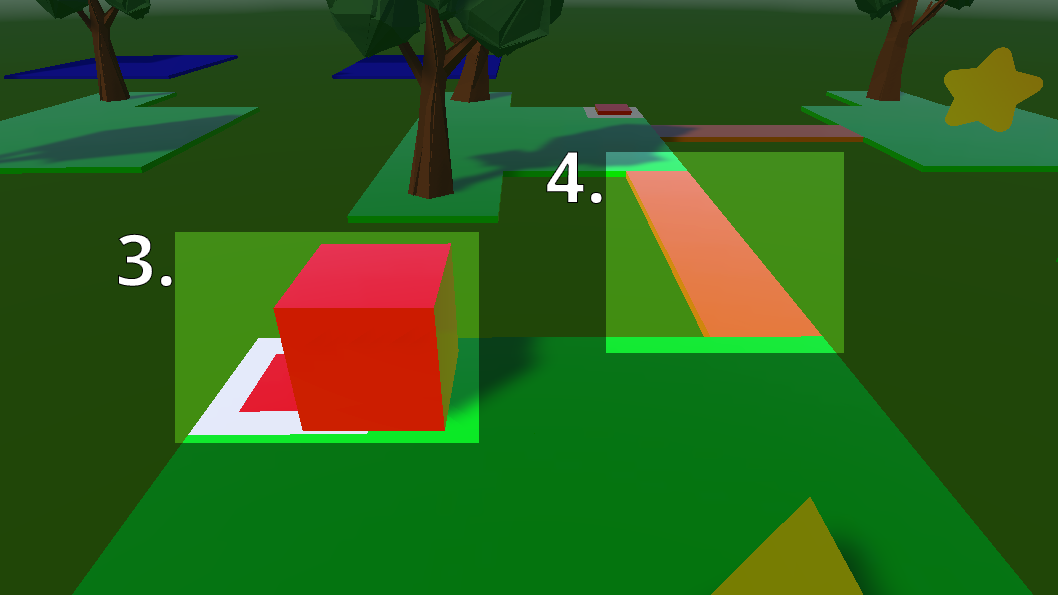
<style>
.page{position:relative;width:1058px;height:595px}
.page>*{position:absolute;margin:0}
.t1{font:72px "NotoSans-Bold";letter-spacing:0.01em;color:#ffffff}
</style>
<div class="page">
<p class="t1" style="left:546px;top:151px;width:57px;height:53px">4.</p>
<p class="t1" style="left:118px;top:233px;width:55px;height:54px">3.</p>
</div>
